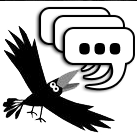
<style>
.page{position:relative;width:137px;height:137px;background:#ffffff}
.page>*{position:absolute;margin:0}
.t1{font:100px "Calibri";letter-spacing:-0.1em;color:#000000}
</style>
<div class="page">
<p class="t1" style="left:79px;top:42px;width:42px;height:12px">...</p>
</div>
